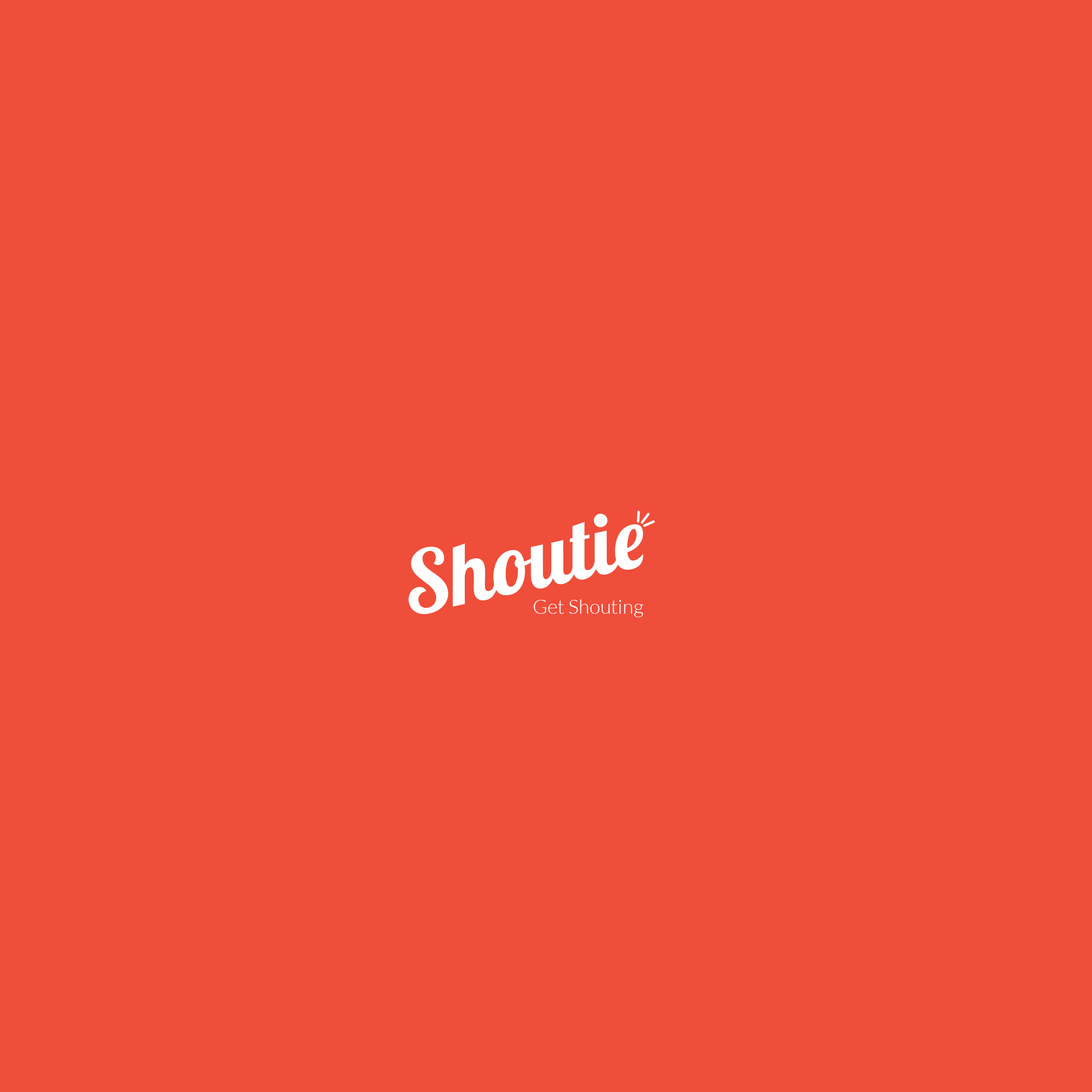
<style>
.page{position:relative;width:1092px;height:1092px;background:#ef4e3a}
.page>*{position:absolute;margin:0}
.t1{font:84.4px "Lobster-Regular";color:#fefefe}
.t2{font:19.8px "Lato-Light";color:#fefefe}
</style>
<div class="page">
<p class="t1" style="left:409px;top:513px;width:234px;height:101px;rotate:-12deg">Shoutie</p>
<p class="t2" style="left:534px;top:599px;width:109px;height:18px">Get Shouting</p>
</div>
